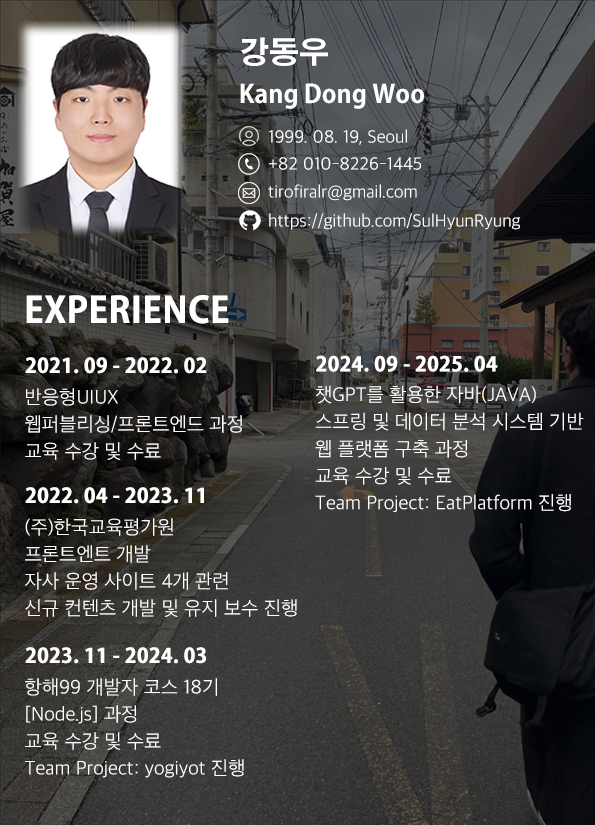
<style>
.page{position:relative;width:595px;height:825px}
.page>*{position:absolute;margin:0}
.t1{font:25px/40px "AdobeGothicStd-Bold";color:#ffffff}
.t2{font:30px/40px "AdobeGothicStd-Bold";color:#ffffff}
.t3{font:18px "AppleSDGothicNeoL00";color:#ffffff}
.t4{font:35px "AdobeGothicStd-Bold";color:#ffffff;font-weight:bold}
.t5{font:20px "AdobeGothicStd-Bold";color:#ffffff;font-weight:bold}
.t6{font:20px/27px "AppleSDGothicNeoL00";color:#ffffff}
.t7{font:20px/27.1px "AppleSDGothicNeoL00";color:#ffffff}
</style>
<div class="page">
<p class="t1" style="left:240px;top:37px;width:184px;height:72px"><span class="t2">강동우<br></span>Kang Dong Woo</p>
<p class="t3" style="left:269px;top:129px;width:138px;height:16px">1999. 08. 19, Seoul</p>
<p class="t3" style="left:269px;top:157px;width:152px;height:13px">+82 010-8226-1445</p>
<p class="t3" style="left:268px;top:184px;width:149px;height:17px">tirofiralr@gmail.com</p>
<p class="t3" style="left:269px;top:213px;width:251px;height:17px">https://github.com/SulHyunRyung</p>
<p class="t4" style="left:26px;top:295px;width:203px;height:29px">EXPERIENCE</p>
<p class="t5" style="left:25px;top:357px;width:182px;height:17px">2021. 09 - 2022. 02</p>
<p class="t5" style="left:316px;top:355px;width:182px;height:17px">2024. 09 - 2025. 04</p>
<p class="t6" style="left:25px;top:388px;width:217px;height:72px">반응형UIUX<br>웹퍼블리싱/프론트엔드 과정 <br>교육 수강 및 수료</p>
<p class="t7" style="left:315px;top:385px;width:269px;height:128px">챗GPT를 활용한 자바(JAVA) <br>스프링 및 데이터 분석 시스템 기반 <br>웹 플랫폼 구축 과정<br>교육 수강 및 수료<br>Team Project: EatPlatform 진행</p>
<p class="t5" style="left:25px;top:487px;width:179px;height:17px">2022. 04 - 2023. 11</p>
<p class="t6" style="left:25px;top:518px;width:272px;height:99px">(주)한국교육평가원<br>프론트엔트 개발<br>자사 운영 사이트 4개 관련<br>신규 컨텐츠 개발 및 유지 보수 진행</p>
<p class="t5" style="left:25px;top:647px;width:181px;height:17px">2023. 11 - 2024. 03</p>
<p class="t6" style="left:25px;top:678px;width:219px;height:100px">항해99 개발자 코스 18기<br>[Node.js] 과정<br>교육 수강 및 수료<br>Team Project: yogiyot 진행</p>
</div>
